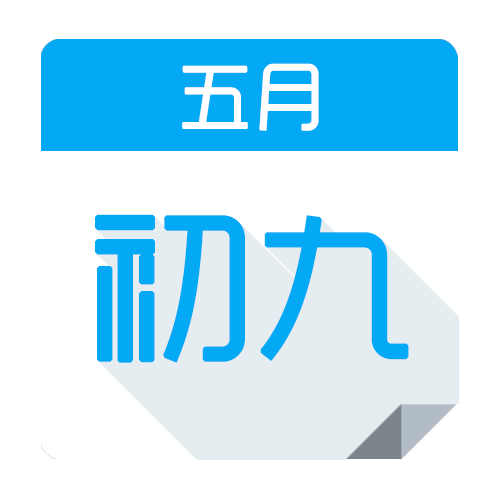
<style>
.page{position:relative;width:500px;height:500px;background:#ffffff}
.page>*{position:absolute;margin:0}
.t1{font:72px "MFYueHei_Noncommercial-Regular";color:#ffffff;font-weight:bold}
.t2{font:160px "MFYueHei_Noncommercial-Regular";color:#03a9f4;font-weight:bold}
</style>
<div class="page">
<p class="t1" style="left:182px;top:63px;width:137px;height:68px">五月</p>
<p class="t2" style="left:95px;top:214px;width:314px;height:149px">初九</p>
</div>
